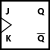
<style>
.page{position:relative;width:50px;height:50px;background:#ffffff}
.page>*{position:absolute;margin:0}
.t1{font:9px "LeelawadeeUI-Bold";color:#000000}
</style>
<div class="page">
<p class="t1" style="left:5px;top:8px;width:4px;height:7px">J</p>
<p class="t1" style="left:37px;top:8px;width:8px;height:8px">Q</p>
<p class="t1" style="left:6px;top:35px;width:6px;height:7px">K</p>
<p class="t1" style="left:37px;top:35px;width:8px;height:8px">Q</p>
</div>
